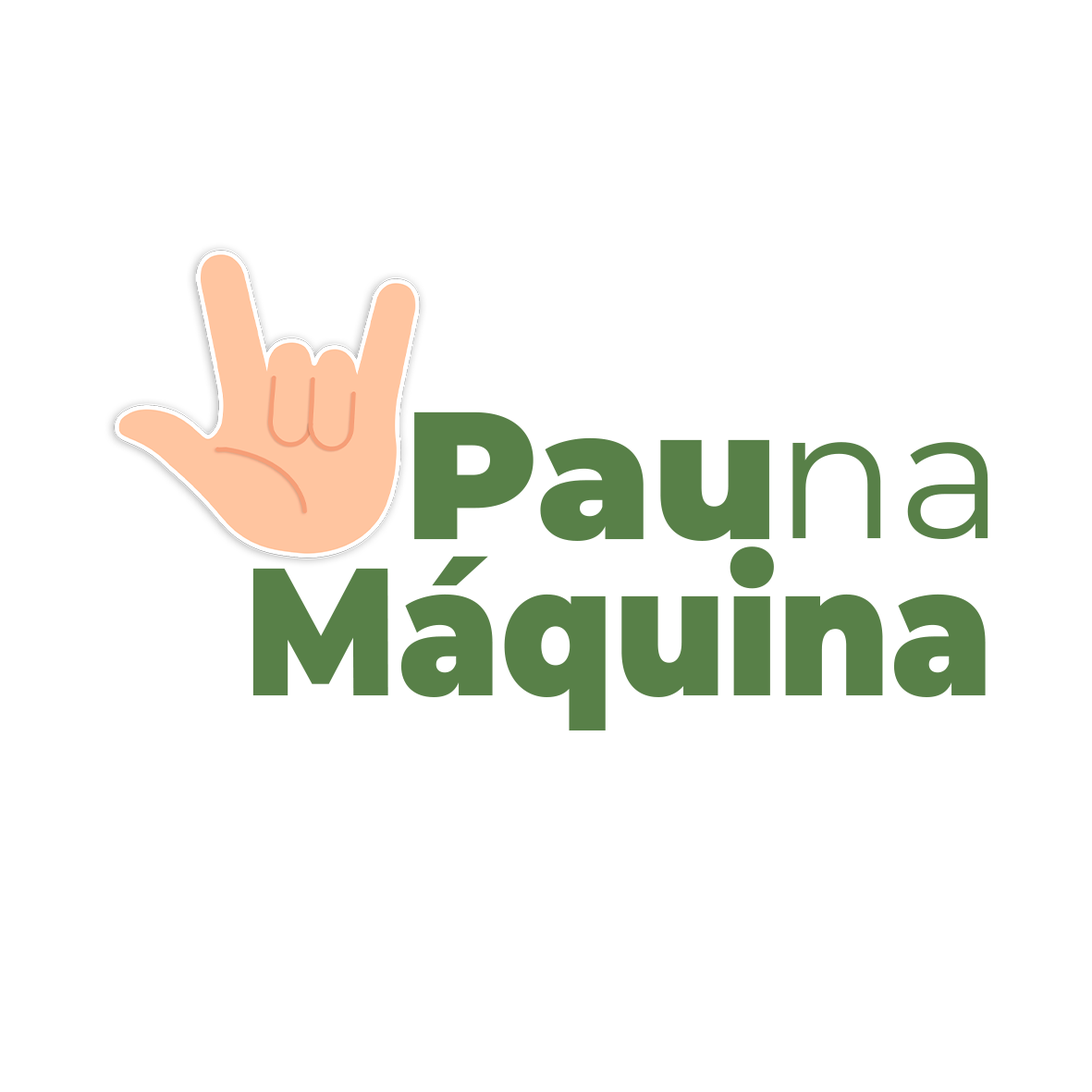
<style>
.page{position:relative;width:1092px;height:1092px;background:#ffffff}
.page>*{position:absolute;margin:0}
.t1{font:181.1px "Montserrat-Black";color:#588048}
.t2{font:181.1px "Montserrat-Regular";color:#588048}
.t3{font:181.1px "Montserrat-Black";color:#588048;scale:0.89 1}
</style>
<div class="page">
<p class="t1" style="left:414px;top:411px;width:355px;height:130px">Pau</p>
<p class="t2" style="left:792px;top:442px;width:196px;height:97px">na</p>
<p class="t3" style="left:252px;top:546px;width:734px;height:184px">Máquina</p>
</div>
